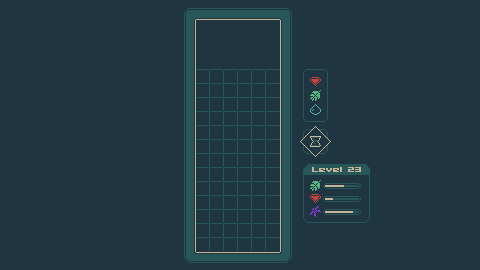
<style>
.page{position:relative;width:480px;height:270px;background:#1f3541}
.page>*{position:absolute;margin:0}
.t1{font:8px "04b09";color:#c7b598}
</style>
<div class="page">
<p class="t1" style="left:312px;top:167px;width:49px;height:5px">Level 23</p>
</div>
